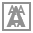
<style>
.page{position:relative;width:33px;height:33px;background:#ffffff}
.page>*{position:absolute;margin:0}
.t1{font:30px "TrebuchetMS-Bold";color:#919191}
.t2{font:14px "TrebuchetMS-Bold";color:#919191}
</style>
<div class="page">
<p class="t1" style="left:6px;top:6px;width:20px;height:21px">A</p>
<p class="t2" style="left:7px;top:5px;width:19px;height:10px">AA</p>
<p class="t2" style="left:7px;top:17px;width:19px;height:10px">AA</p>
</div>
